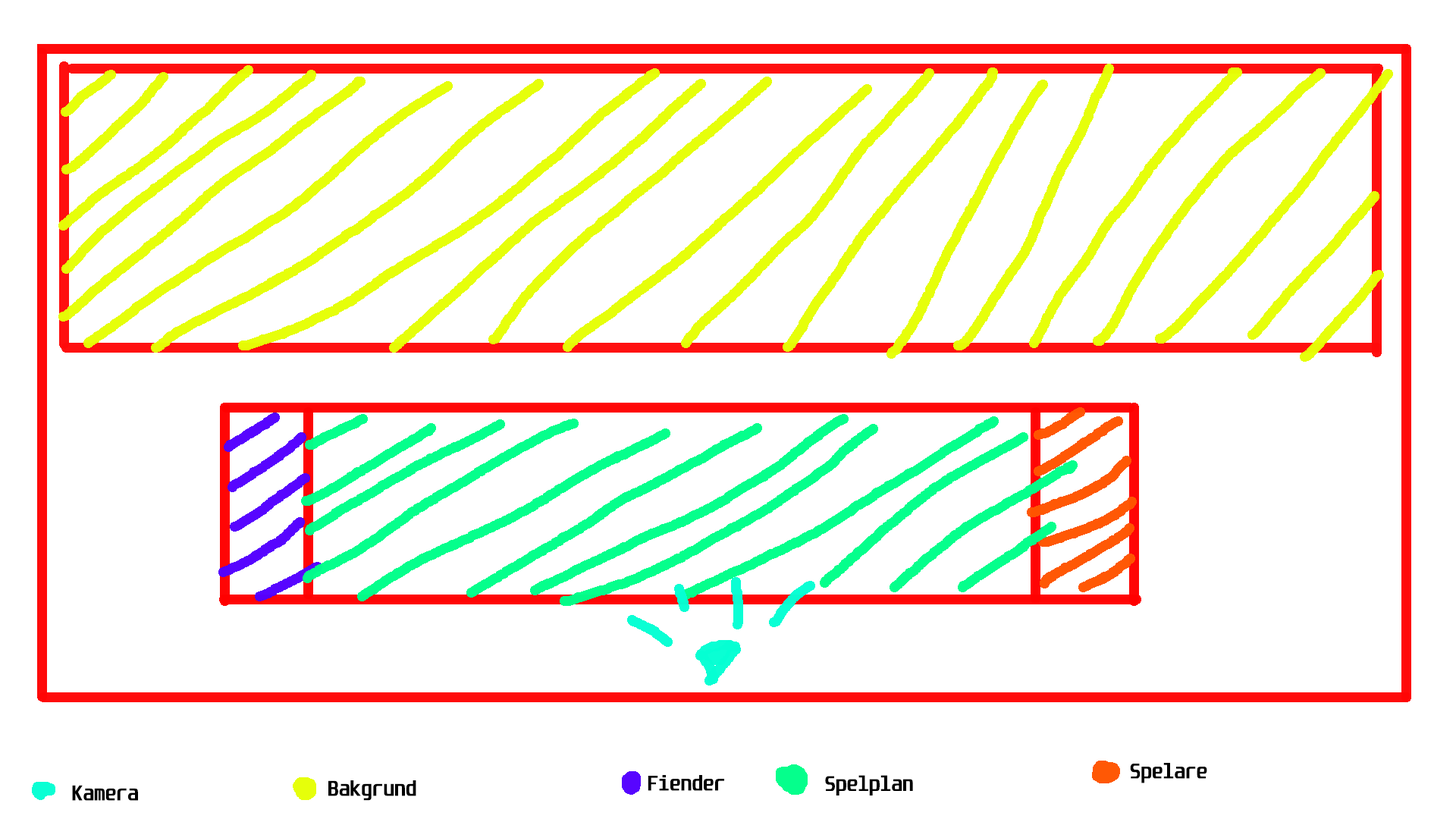
<style>
.page{position:relative;width:1456px;height:819px;background:#ffffff}
.page>*{position:absolute;margin:0}
.t1{font:18.2px "Unispace-Bold";color:#000000}
</style>
<div class="page">
<p class="t1" style="left:1130px;top:763px;width:77px;height:20px">Spelare</p>
<p class="t1" style="left:72px;top:785px;width:66px;height:16px">Kamera</p>
<p class="t1" style="left:328px;top:780px;width:88px;height:21px">Bakgrund</p>
<p class="t1" style="left:648px;top:775px;width:76px;height:16px">Fiender</p>
<p class="t1" style="left:825px;top:775px;width:88px;height:20px">Spelplan</p>
</div>
